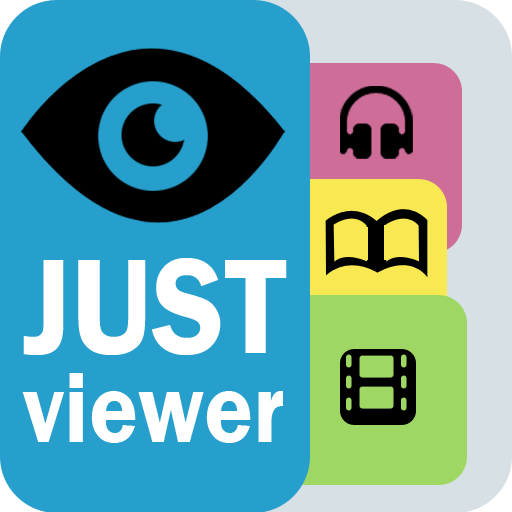
<style>
.page{position:relative;width:512px;height:512px;background:#269fcc}
.page>*{position:absolute;margin:0}
.t1{font:102px/120px "FranklinGothic-Demi";color:#ffffff;scale:0.9 1}
.t2{font:139px/120px "FranklinGothic-Demi";color:#ffffff;scale:0.9 1}
</style>
<div class="page">
<p class="t1" style="left:22px;top:258px;width:265px;height:185px"><span class="t2">JUST<br></span>viewer</p>
</div>
